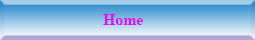
<style>
.page{position:relative;width:255px;height:40px}
.page>*{position:absolute;margin:0}
.t1{font:15.8px "TimesNewRomanPS-BoldMT";color:#d815ed}
</style>
<div class="page">
<p class="t1" style="left:103px;top:14px;width:40px;height:11px">Home</p>
</div>
